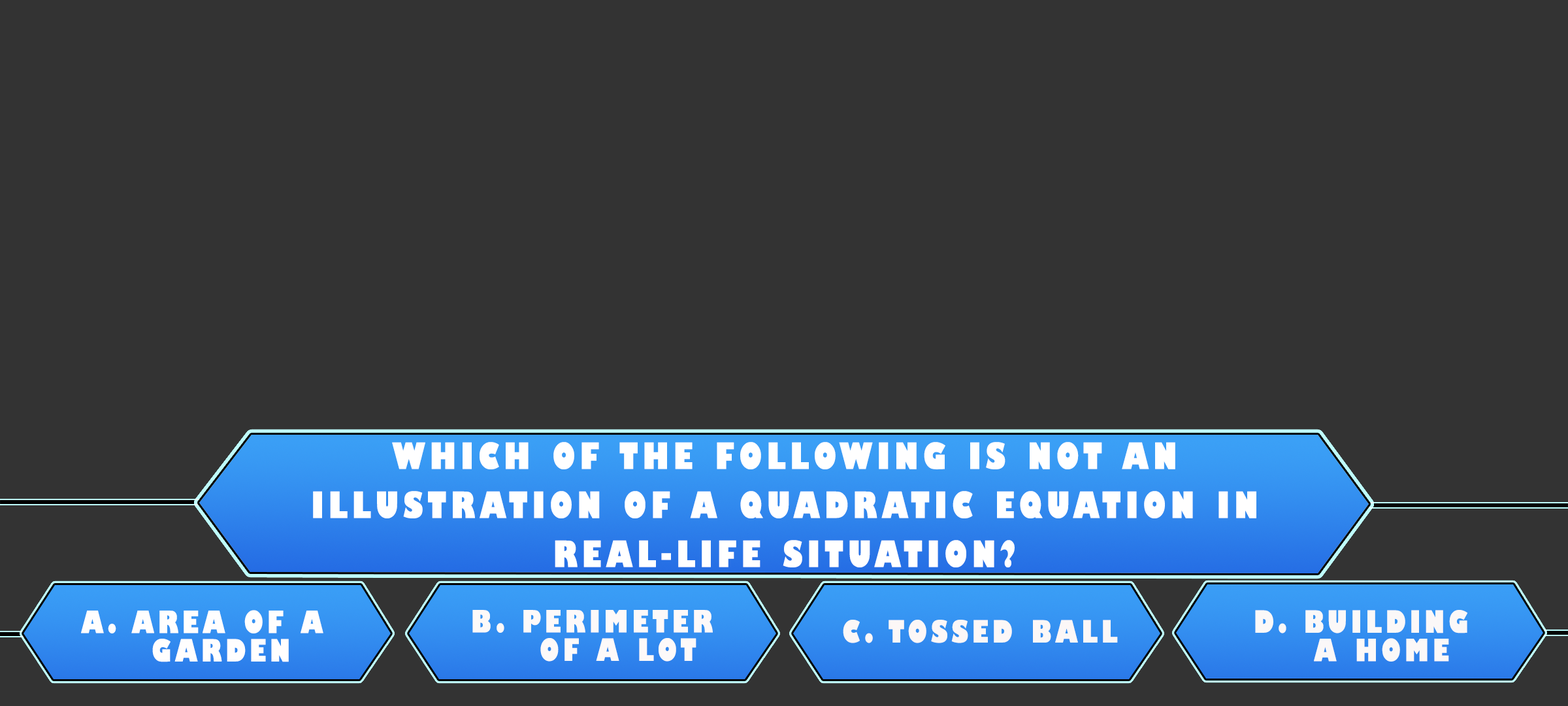
<style>
.page{position:relative;width:1568px;height:706px;background:#333333}
.page>*{position:absolute;margin:0}
.t1{font:35.4px/49px "GillSans-UltraBoldCondensed";letter-spacing:0.115em;color:#ffffff;text-transform:uppercase;scale:1.12 1}
.t2{font:29.9px/28.4px "GillSans-UltraBoldCondensed";letter-spacing:0.115em;color:#fffefe;text-transform:uppercase;scale:1.12 1}
.t3{font:29.9px/28.4px "GillSans-UltraBoldCondensed";letter-spacing:0.115em;color:#fdf9f9;text-transform:uppercase;scale:1.12 1}
.t4{font:29.9px/28.4px "GillSans-UltraBoldCondensed";letter-spacing:0.115em;color:#fbf8f8;text-transform:uppercase;scale:1.12 1}
.t5{font:29.9px "GillSans-UltraBoldCondensed";letter-spacing:0.115em;color:#fcf7f7;text-transform:uppercase;scale:1.12 1}
</style>
<div class="page">
<p class="t1" style="left:313px;top:442px;width:943px;height:125px;text-align:center">Which of the following is not an<br>illustration of a quadratic equation in<br>real-life situation?</p>
<p class="t2" style="left:81px;top:610px;width:242px;height:52px">a. Area of a<br>    garden</p>
<p class="t3" style="left:472px;top:610px;width:241px;height:51px">b. Perimeter<br>    of a lot</p>
<p class="t4" style="left:1255px;top:610px;width:213px;height:51px">d. Building<br>   a Home</p>
<p class="t5" style="left:843px;top:619px;width:275px;height:24px">c. Tossed ball</p>
</div>
